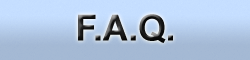
<style>
.page{position:relative;width:250px;height:60px}
.page>*{position:absolute;margin:0}
.t1{font:36px "Arial-BoldMT";letter-spacing:-0.01em}
</style>
<div class="page">
<p class="t1" style="left:78px;top:14px;width:95px;height:29px">F.A.Q.</p>
</div>
